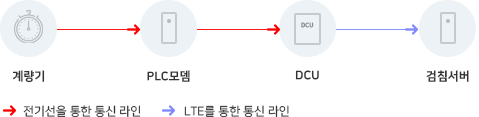
<style>
.page{position:relative;width:479px;height:117px;background:#ffffff}
.page>*{position:absolute;margin:0}
.t1{font:6px "NanumSquareEB"}
.t2{font:12px "NanumSquareEB";color:#333333}
.t3{font:12px "NanumSquareR";color:#333333}
</style>
<div class="page">
<p class="t1" style="left:301px;top:22px;width:13px;height:6px">DCU</p>
<p class="t2" style="left:12px;top:70px;width:33px;height:13px">계량기</p>
<p class="t2" style="left:147px;top:70px;width:43px;height:12px">PLC모뎀</p>
<p class="t2" style="left:295px;top:70px;width:24px;height:10px">DCU</p>
<p class="t2" style="left:426px;top:70px;width:43px;height:12px">검침서버</p>
<p class="t3" style="left:23px;top:105px;width:118px;height:13px">전기선을 통한 통신 라인</p>
<p class="t3" style="left:184px;top:105px;width:105px;height:13px">LTE를 통한 통신 라인</p>
</div>
